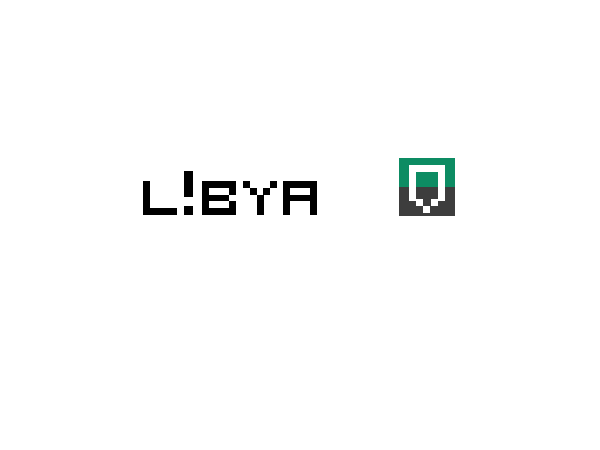
<style>
.page{position:relative;width:600px;height:450px;background:#ffffff}
.page>*{position:absolute;margin:0}
.t1{font:68px "VisitorTT1BRK";color:#000000}
.t2{font:88px "VisitorTT1BRK";color:#000000}
.t3{font:72px "VisitorTT1BRK";color:#ffffff}
</style>
<div class="page">
<p class="t1" style="left:143px;top:171px;width:174px;height:44px">L<span class="t2">!</span>bya</p>
<p class="t3" style="left:409px;top:165px;width:36px;height:36px;rotate:90deg">c</p>
<p class="t3" style="left:409px;top:177px;width:36px;height:36px">v</p>
</div>
